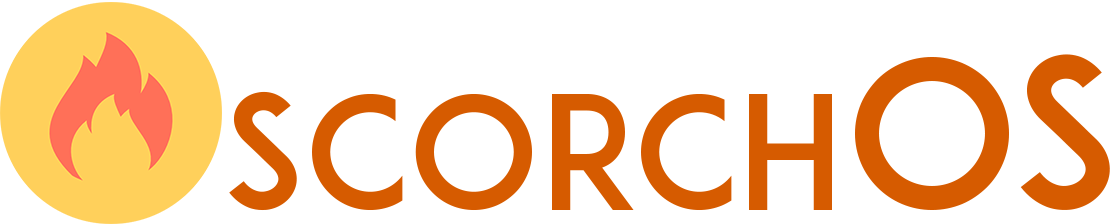
<style>
.page{position:relative;width:1120px;height:224px;background:#ffffff}
.page>*{position:absolute;margin:0}
.t1{font:156.8px "ADAM.CGPRO";color:#d65b00}
.t2{font:206.8px "ADAM.CGPRO";color:#d65b00}
</style>
<div class="page">
<p class="t1" style="left:229px;top:54px;width:881px;height:157px">Scorch<span class="t2">OS</span></p>
</div>
